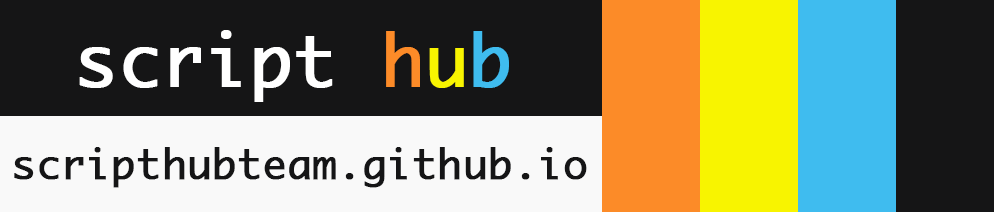
<style>
.page{position:relative;width:994px;height:212px;background:#151516}
.page>*{position:absolute;margin:0}
.t1{font:70px "Monaco";color:#ffffff;font-weight:bold}
.t2{font:70px "Monaco";color:#fc8b28;font-weight:bold}
.t3{font:70px "Monaco";color:#f8f400;font-weight:bold}
.t4{font:70px "Monaco";color:#3fbcef;font-weight:bold}
.t5{font:40px "Monaco";color:#151516;font-weight:bold}
</style>
<div class="page">
<p class="t1" style="left:79px;top:30px;width:430px;height:72px">script <span class="t2">h</span><span class="t3">u</span><span class="t4">b</span></p>
<p class="t5" style="left:14px;top:147px;width:573px;height:41px">scripthubteam.github.io</p>
</div>
